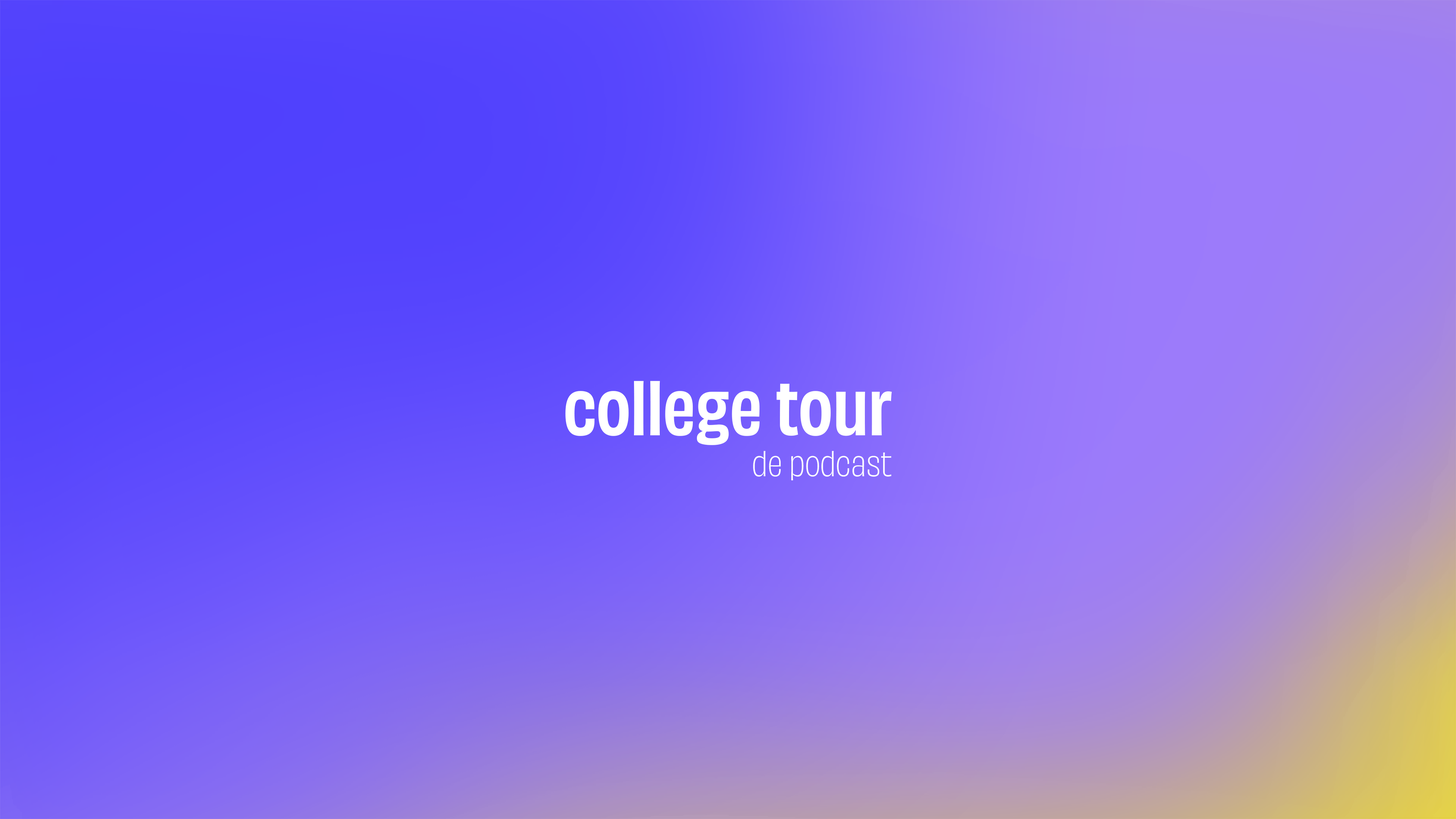
<style>
.page{position:relative;width:1456px;height:819px}
.page>*{position:absolute;margin:0}
.t1{font:70.1px "ObviouslyVar-NarrowSemibold";color:#ffffff}
.t2{font:32.6px "ObviouslyVar-NarrowLight";color:#ffffff}
</style>
<div class="page">
<p class="t1" style="left:565px;top:381px;width:327px;height:64px">college tour</p>
<p class="t2" style="left:753px;top:451px;width:138px;height:29px">de podcast</p>
</div>
